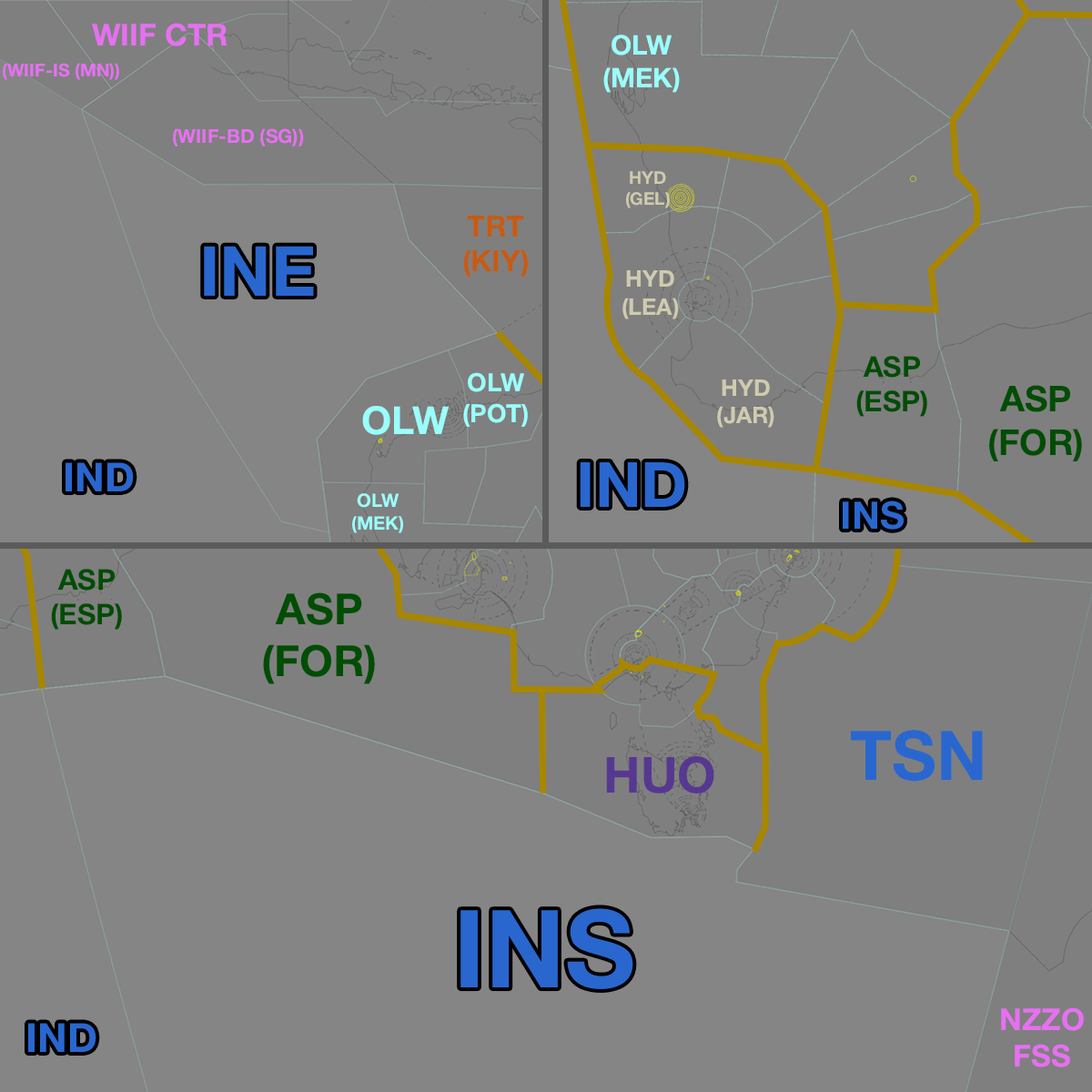
<style>
.page{position:relative;width:1092px;height:1092px;background:#7f7f7f}
.page>*{position:absolute;margin:0}
.t1{font:30.4px "HelveticaNeue-Bold";color:#e670f1}
.t2{font:27.2px "HelveticaNeue-Bold";color:#9afffb}
.t3{font:17.9px "HelveticaNeue-Bold";color:#e670f1}
.t4{font:19.3px "HelveticaNeue-Bold";color:#e670f1}
.t5{font:17.4px "HelveticaNeue-Bold";color:#cfcbae}
.t6{font:29.4px "HelveticaNeue-Bold";color:#c75b12}
.t7{font:69.5px "HelveticaNeue-Bold";color:#2967cf}
.t8{font:22.9px "HelveticaNeue-Bold";color:#cfcbae}
.t9{font:28.6px "HelveticaNeue-Bold";color:#004d04}
.t10{font:25.2px "HelveticaNeue-Bold";color:#9afffb}
.t11{font:35.8px "HelveticaNeue-Bold";color:#004d04}
.t12{font:38.8px "HelveticaNeue-Bold";color:#9afffb}
.t13{font:40.4px "HelveticaNeue-Bold";color:#2967cf}
.t14{font:62.5px "HelveticaNeue-Bold";color:#2967cf}
.t15{font:18.5px "HelveticaNeue-Bold";color:#9afffb}
.t16{font:38.1px "HelveticaNeue-Bold";color:#2967cf}
.t17{font:43.1px "HelveticaNeue-Bold";color:#004d04}
.t18{font:68.6px "HelveticaNeue-Bold";color:#2967cf}
.t19{font:49.9px "HelveticaNeue-Bold";color:#573890}
.t20{font:108.3px "HelveticaNeue-Bold";color:#2967cf}
</style>
<div class="page">
<p class="t1" style="left:92px;top:23px;width:135px;height:23px">WIIF CTR</p>
<p class="t2" style="left:603px;top:35px;width:77px;height:58px;text-align:center">OLW<br>(MEK)</p>
<p class="t3" style="left:3px;top:63px;width:116px;height:17px">(WIIF-IS (MN))</p>
<p class="t4" style="left:173px;top:128px;width:131px;height:19px">(WIIF-BD (SG))</p>
<p class="t5" style="left:626px;top:171px;width:44px;height:37px;text-align:center">HYD<br>(GEL)</p>
<p class="t6" style="left:463px;top:216px;width:65px;height:61px;text-align:center">TRT<br>(KIY)</p>
<p class="t7" style="left:204px;top:246px;width:110px;height:50px">INE</p>
<p class="t8" style="left:622px;top:270px;width:57px;height:49px;text-align:center">HYD<br>(LEA)</p>
<p class="t9" style="left:856px;top:356px;width:71px;height:61px;text-align:center">ASP<br>(ESP)</p>
<p class="t10" style="left:463px;top:372px;width:65px;height:55px;text-align:center">OLW<br>(POT)</p>
<p class="t8" style="left:717px;top:379px;width:57px;height:49px;text-align:center">HYD<br>(JAR)</p>
<p class="t11" style="left:989px;top:385px;width:93px;height:76px;text-align:center">ASP<br>(FOR)</p>
<p class="t12" style="left:362px;top:406px;width:88px;height:29px">OLW</p>
<p class="t13" style="left:66px;top:462px;width:68px;height:29px">IND</p>
<p class="t14" style="left:580px;top:462px;width:105px;height:45px">IND</p>
<p class="t15" style="left:352px;top:493px;width:51px;height:40px;text-align:center">OLW<br>(MEK)</p>
<p class="t16" style="left:843px;top:500px;width:61px;height:30px">INS</p>
<p class="t9" style="left:51px;top:569px;width:71px;height:61px;text-align:center">ASP<br>(ESP)</p>
<p class="t17" style="left:263px;top:592px;width:112px;height:92px;text-align:center">ASP<br>(FOR)</p>
<p class="t18" style="left:851px;top:730px;width:132px;height:52px">TSN</p>
<p class="t19" style="left:606px;top:756px;width:108px;height:38px">HUO</p>
<p class="t20" style="left:460px;top:908px;width:173px;height:81px">INS</p>
<p class="t1" style="left:1001px;top:1007px;width:83px;height:60px;text-align:center">NZZO<br>FSS</p>
<p class="t13" style="left:28px;top:1023px;width:68px;height:29px">IND</p>
</div>
